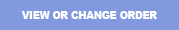
<style>
.page{position:relative;width:179px;height:30px;background:#8299df}
.page>*{position:absolute;margin:0}
.t1{font:18.2px "Arial-Black";color:#ffffff;scale:0.9 1}
</style>
<div class="page">
<p class="t1" style="left:21px;top:11px;width:136px;height:8px">VIEW OR CHANGE ORDER</p>
</div>
